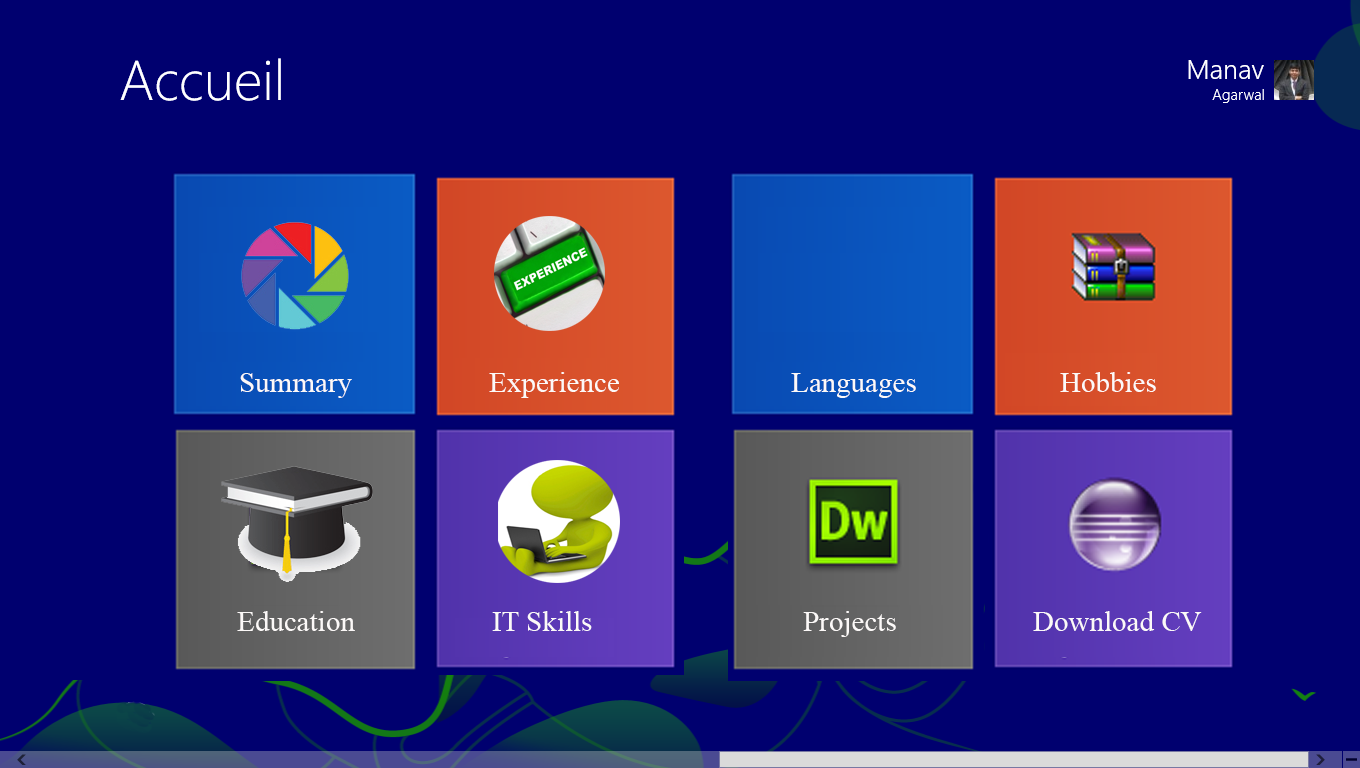
<style>
.page{position:relative;width:1360px;height:768px;background:#00006f}
.page>*{position:absolute;margin:0}
.t1{font:29px "TimesNewRomanPSMT";color:#fcf9f8}
</style>
<div class="page">
<p class="t1" style="left:240px;top:373px;width:112px;height:25px">Summary</p>
<p class="t1" style="left:489px;top:372px;width:130px;height:26px">Experience</p>
<p class="t1" style="left:791px;top:373px;width:125px;height:25px">Languages</p>
<p class="t1" style="left:1060px;top:372px;width:96px;height:20px">Hobbies</p>
<p class="t1" style="left:237px;top:611px;width:118px;height:20px">Education</p>
<p class="t1" style="left:492px;top:611px;width:100px;height:20px">IT Skills</p>
<p class="t1" style="left:803px;top:611px;width:93px;height:26px">Projects</p>
<p class="t1" style="left:1033px;top:611px;width:169px;height:20px">Download CV</p>
</div>
